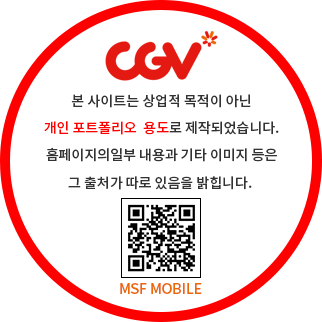
<style>
.page{position:relative;width:322px;height:322px;background:#ffffff}
.page>*{position:absolute;margin:0}
.t1{font:14px/27.2px "NotoSansKR-Medium";color:#333333}
.t2{font:14px/27.2px "NotoSansKR-Medium";color:#ff0000}
.t3{font:14px "NotoSansKR-Medium";color:#ec6706}
</style>
<div class="page">
<p class="t1" style="left:44px;top:94px;width:235px;height:96px;text-align:center">본 사이트는 상업적 목적이 아닌<br><span class="t2">개인 포트폴리오  용도</span>로 제작되었습니다.<br>홈페이지의일부 내용과 기타 이미지 등은<br>그 출처가 따로 있음을 밝힙니다.</p>
<p class="t3" style="left:120px;top:283px;width:82px;height:11px">MSF MOBILE</p>
</div>
